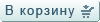
<style>
.page{position:relative;width:100px;height:22px}
.page>*{position:absolute;margin:0}
.t1{font:13px "ArialMT";letter-spacing:0.099em;color:#345a70}
</style>
<div class="page">
<p class="t1" style="left:5px;top:5px;width:70px;height:13px">В корзину</p>
</div>
